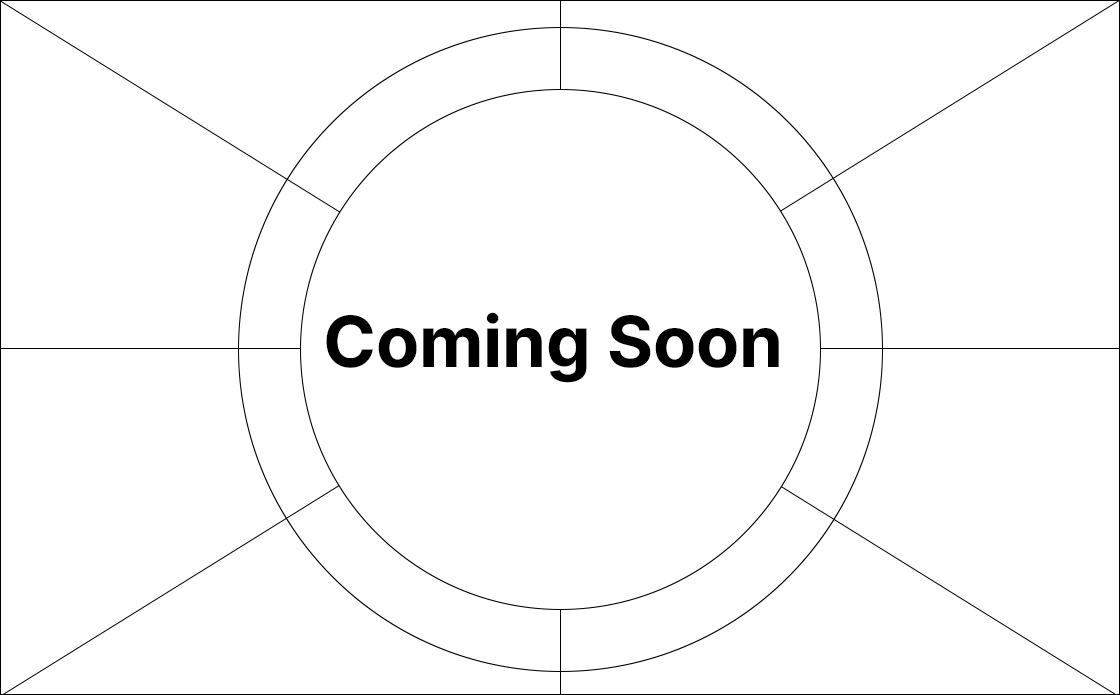
<style>
.page{position:relative;width:1120px;height:695px;background:#ffffff}
.page>*{position:absolute;margin:0}
.t1{font:70.4px "Inter-Bold";color:#000000}
</style>
<div class="page">
<p class="t1" style="left:326px;top:312px;width:453px;height:71px">Coming Soon</p>
</div>
